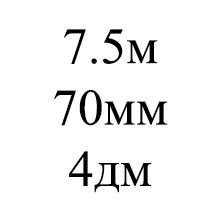
<style>
.page{position:relative;width:221px;height:221px;background:#ffffff}
.page>*{position:absolute;margin:0}
.t1{font:51.1px "TimesNewRomanPSMT";color:#000000}
</style>
<div class="page">
<p class="t1" style="left:54px;top:29px;width:114px;height:164px;text-align:center">7.5м<br>70мм<br>4дм</p>
</div>
